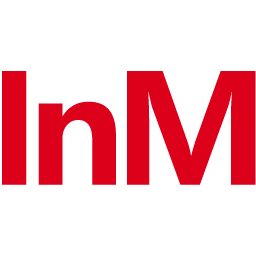
<style>
.page{position:relative;width:256px;height:256px;background:#ffffff}
.page>*{position:absolute;margin:0}
.t1{font:150px "MicrosoftYaHei-Bold";letter-spacing:-0.075em;color:#dd001b}
</style>
<div class="page">
<p class="t1" style="left:2px;top:71px;width:254px;height:114px">InM</p>
</div>
